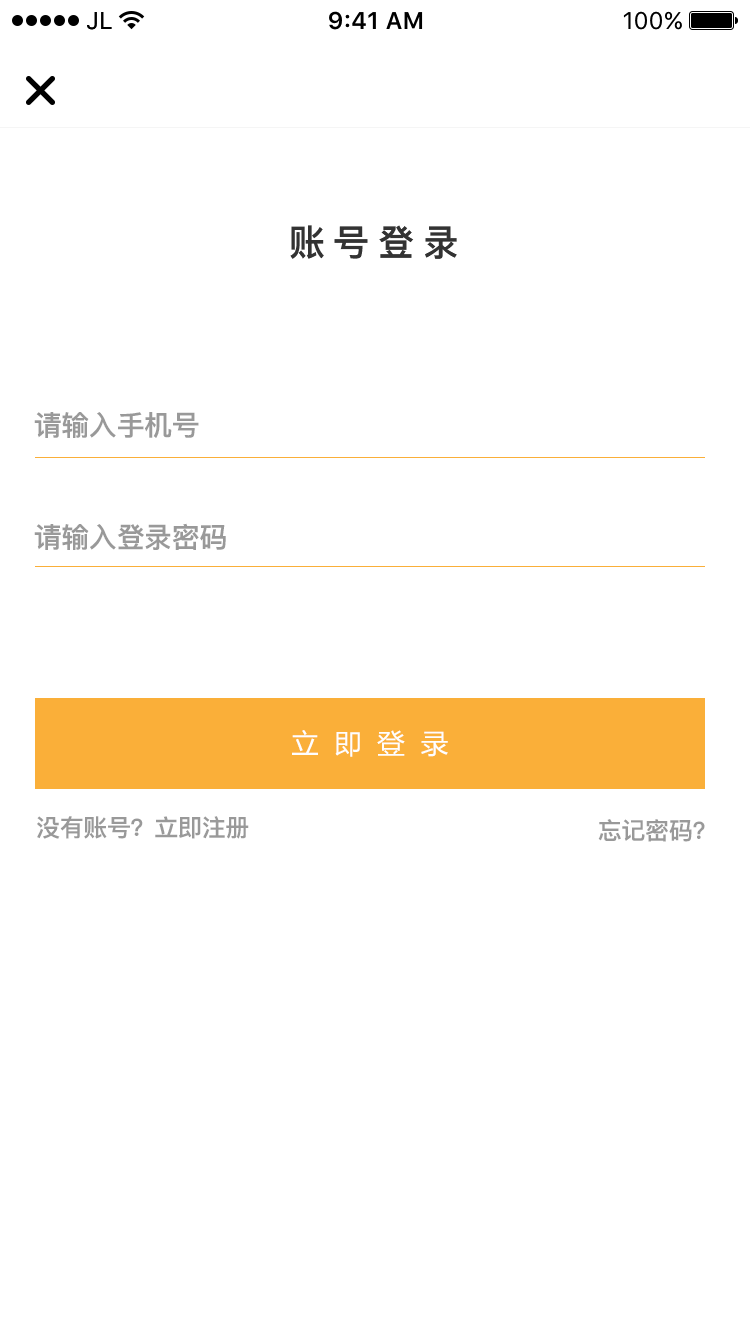
<style>
.page{position:relative;width:750px;height:1334px;background:#ffffff}
.page>*{position:absolute;margin:0}
.t1{font:36px "PingFang-SC-Heavy";letter-spacing:0.24em;color:#333333}
.t2{font:28px "PingFang-SC-Heavy";color:#999999}
.t3{font:27.6px "MicrosoftYaHei";letter-spacing:0.56em;color:#fefefe}
.t4{font:24px "PingFang-SC-Heavy";color:#999999}
</style>
<div class="page">
<p class="t1" style="left:290px;top:225px;width:167px;height:34px">账号登录</p>
<p class="t2" style="left:34px;top:412px;width:165px;height:26px">请输入手机号</p>
<p class="t2" style="left:34px;top:523px;width:192px;height:27px">请输入登录密码</p>
<p class="t3" style="left:292px;top:730px;width:156px;height:27px">立即登录</p>
<p class="t4" style="left:37px;top:816px;width:212px;height:23px">没有账号？立即注册</p>
<p class="t4" style="left:598px;top:819px;width:107px;height:23px">忘记密码?</p>
</div>
